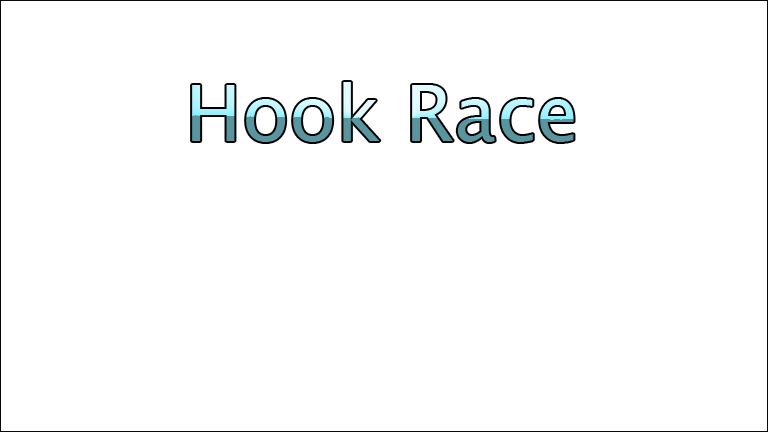
<style>
.page{position:relative;width:768px;height:432px;background:#ffffff}
.page>*{position:absolute;margin:0}
.t1{font:77px "LucidaSansUnicode"}
</style>
<div class="page">
<p class="t1" style="left:192px;top:82px;width:382px;height:60px">Hook Race</p>
</div>
